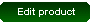
<style>
.page{position:relative;width:90px;height:24px;background:#ffffff}
.page>*{position:absolute;margin:0}
.t1{font:10px "Arial-BoldMT";color:#ffffff}
</style>
<div class="page">
<p class="t1" style="left:18px;top:8px;width:57px;height:9px">Edit product</p>
</div>
